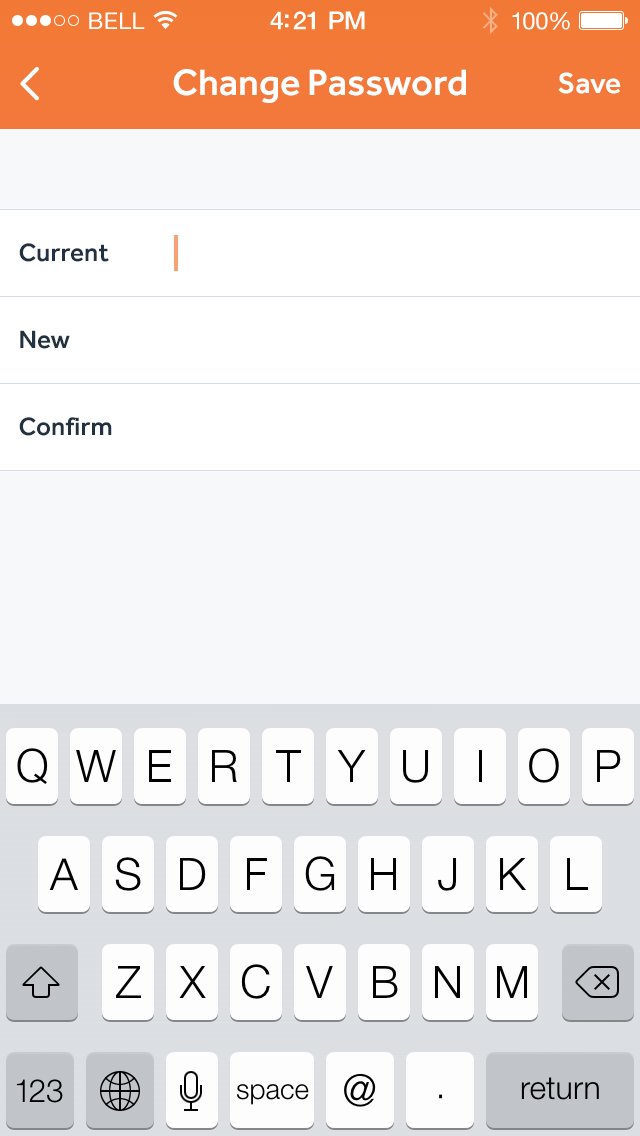
<style>
.page{position:relative;width:640px;height:1136px;background:#f6f8fa}
.page>*{position:absolute;margin:0}
.t1{font:23px "HelveticaNeue";letter-spacing:0.02em;color:#ffffff}
.t2{font:25px "HelveticaNeue-Medium";letter-spacing:-0.02em;color:#ffffff}
.t3{font:24px "HelveticaNeue";letter-spacing:-0.02em;color:#ffffff}
.t4{font:38px "Effra-Medium";color:#ffffff}
.t5{font:30px "Effra-Medium";color:#ffffff}
.t6{font:26px "Effra-Medium";color:#22313f}
</style>
<div class="page">
<p class="t1" style="left:89px;top:12px;width:56px;height:17px">BELL</p>
<p class="t2" style="left:270px;top:11px;width:95px;height:19px">4:21 PM</p>
<p class="t3" style="left:512px;top:12px;width:58px;height:18px">100%</p>
<p class="t4" style="left:173px;top:69px;width:293px;height:34px">Change Password</p>
<p class="t5" style="left:558px;top:72px;width:63px;height:22px">Save</p>
<p class="t6" style="left:19px;top:243px;width:90px;height:19px">Current</p>
<p class="t6" style="left:20px;top:330px;width:50px;height:19px">New</p>
<p class="t6" style="left:19px;top:417px;width:93px;height:19px">Confirm</p>
</div>
